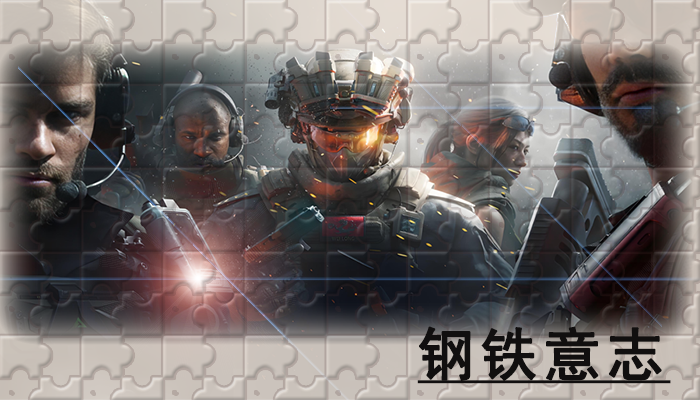
<style>
.page{position:relative;width:700px;height:400px}
.page>*{position:absolute;margin:0}
.t1{font:57.6px "SimHei";letter-spacing:0.1em;color:#110f0f;font-weight:bold;text-decoration:underline}
</style>
<div class="page">
<p class="t1" style="left:417px;top:326px;width:254px;height:58px">钢铁意志</p>
</div>
